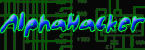
<style>
.page{position:relative;width:145px;height:50px;background:#070707}
.page>*{position:absolute;margin:0}
.t1{font:18px "KidTYPEPaint"}
</style>
<div class="page">
<p class="t1" style="left:0px;top:12px;width:145px;height:25px">AlphaHacker</p>
</div>
